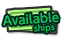
<style>
.page{position:relative;width:65px;height:41px;background:#ffffff}
.page>*{position:absolute;margin:0}
.t1{font:12px/8px "UDShinGoPro-DeBold";color:#1fbb56}
.t2{font:8px/8px "UDShinGoPro-DeBold";color:#1fbb56}
</style>
<div class="page">
<p class="t1" style="left:3px;top:12px;width:56px;height:21px;text-align:center;rotate:-4deg">Available<br><span class="t2">           ships</span></p>
</div>
